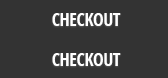
<style>
.page{position:relative;width:168px;height:78px;background:#333333}
.page>*{position:absolute;margin:0}
.t1{font:18px "OpenSans-CondensedBold";letter-spacing:-0.025em;color:#ffffff;text-transform:uppercase}
</style>
<div class="page">
<p class="t1" style="left:52px;top:13px;width:69px;height:13px">Checkout</p>
<p class="t1" style="left:52px;top:53px;width:69px;height:13px">Checkout</p>
</div>
